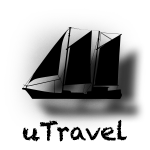
<style>
.page{position:relative;width:150px;height:150px;background:#ffffff}
.page>*{position:absolute;margin:0}
.t1{font:25px "Chalkduster";color:#000000}
</style>
<div class="page">
<p class="t1" style="left:22px;top:119px;width:105px;height:23px">uTravel</p>
</div>
